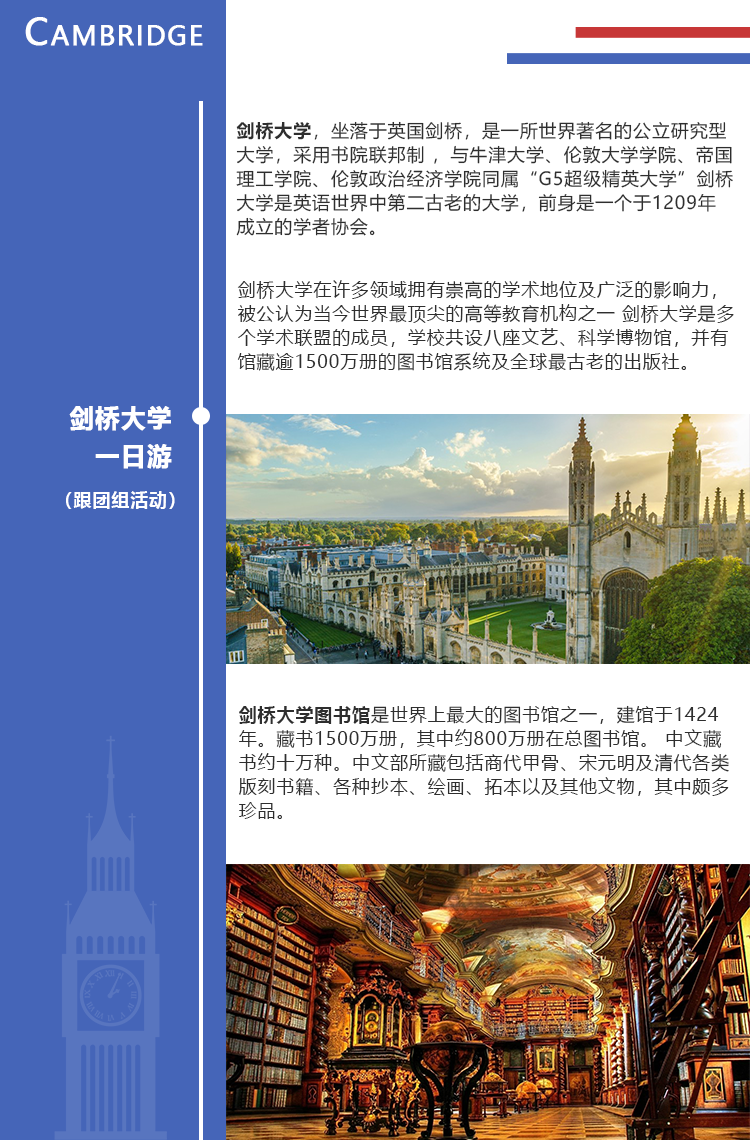
<style>
.page{position:relative;width:750px;height:1140px;background:#ffffff}
.page>*{position:absolute;margin:0}
.t1{font:26px "MicrosoftYaHei";letter-spacing:0.05em;color:#ffffff;font-weight:bold}
.t2{font:36px "MicrosoftYaHei";letter-spacing:0.05em;color:#ffffff;font-weight:bold}
.t3{font:18px/24px "MicrosoftYaHei";letter-spacing:0.05em;color:#2e2e2e}
.t4{font:18px/24px "MicrosoftYaHei-Bold";letter-spacing:0.05em;color:#2e2e2e}
.t5{font:24px/37.5px "MicrosoftYaHei-Bold";letter-spacing:0.05em;color:#ffffff;font-weight:bold}
.t6{font:18px "MicrosoftYaHei-Bold";letter-spacing:0.05em;color:#ffffff}
</style>
<div class="page">
<p class="t1" style="left:25px;top:17px;width:178px;height:29px"><span class="t2">C</span>AMBRIDGE</p>
<p class="t3" style="left:236px;top:121px;width:497px;height:115px"><span class="t4">剑桥大学</span>，坐落于英国剑桥，是一所世界著名的公立研究型大学，采用书院联邦制 ，与牛津大学、伦敦大学学院、帝国理工学院、伦敦政治经济学院同属“G5超级精英大学”剑桥大学是英语世界中第二古老的大学，前身是一个于1209年成立的学者协会。</p>
<p class="t3" style="left:237px;top:280px;width:497px;height:91px">剑桥大学在许多领域拥有崇高的学术地位及广泛的影响力，被公认为当今世界最顶尖的高等教育机构之一 剑桥大学是多个学术联盟的成员，学校共设八座文艺、科学博物馆，并有<br>馆藏逾1500万册的图书馆系统及全球最古老的出版社。</p>
<p class="t5" style="left:69px;top:406px;width:103px;height:63px;text-align:right">剑桥大学<br>一日游</p>
<p class="t6" style="left:66px;top:491px;width:109px;height:18px">（跟团组活动）</p>
<p class="t3" style="left:239px;top:705px;width:490px;height:114px"><span class="t4">剑桥大学图书馆</span>是世界上最大的图书馆之一，建馆于1424年。藏书1500万册，其中约800万册在总图书馆。 中文藏书约十万种。中文部所藏包括商代甲骨、宋元明及清代各类版刻书籍、各种抄本、绘画、拓本以及其他文物，其中颇多珍品。</p>
</div>
